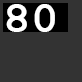
<style>
.page{position:relative;width:82px;height:82px;background:#333333}
.page>*{position:absolute;margin:0}
.t1{font:45.8px "CourierNewPS-BoldMT";color:#ffffff}
</style>
<div class="page">
<p class="t1" style="left:6px;top:4px;width:49px;height:28px">80</p>
</div>
